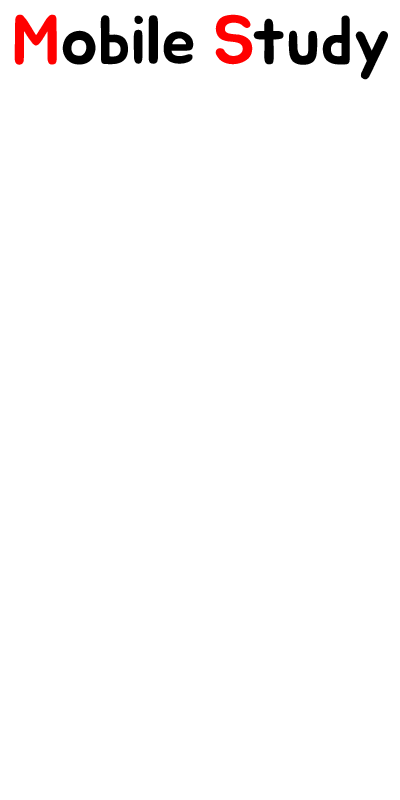
<style>
.page{position:relative;width:400px;height:800px;background:#ffffff}
.page>*{position:absolute;margin:0}
.t1{font:68.9px "BMJUA";color:#000000}
.t2{font:68.9px "BMJUA";color:#ff0000}
</style>
<div class="page">
<p class="t1" style="left:14px;top:14px;width:374px;height:66px"><span class="t2">M</span>obile <span class="t2">S</span>tudy</p>
</div>
